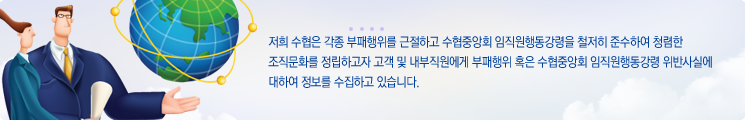
<style>
.page{position:relative;width:745px;height:120px}
.page>*{position:absolute;margin:0}
.t1{font:13px/20px "YGO530";letter-spacing:-0.05em;color:#003f99;text-transform:uppercase;scale:0.9 1}
</style>
<div class="page">
<p class="t1" style="left:268px;top:36px;width:444px;height:52px">저희 수협은 각종 부패행위를 근절하고 수협중앙회 임직원행동강령을 철저히 준수하여 청렴한 <br>조직문화를 정립하고자 고객 및 내부직원에게 부패행위 혹은 수협중앙회 임직원행동강령 위반사실에 <br>대하여 정보를 수집하고 있습니다.</p>
</div>
